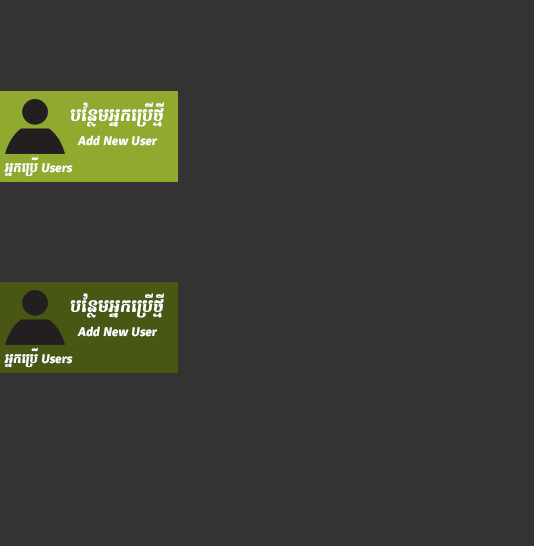
<style>
.page{position:relative;width:534px;height:546px;background:#333333}
.page>*{position:absolute;margin:0}
.t1{font:16px "Romnea-Italic";color:#ffffff}
.t2{font:12px "Romnea-Italic";color:#ffffff}
</style>
<div class="page">
<p class="t1" style="left:70px;top:102px;width:94px;height:25px">ប​ន្ថែម​អ្នក​បេ្រី​ថ្មី​</p>
<p class="t2" style="left:77px;top:135px;width:81px;height:11px">Add New User</p>
<p class="t2" style="left:4px;top:156px;width:69px;height:21px;text-align:center">អ្នក​បេ្រ​ី​ Users</p>
<p class="t1" style="left:70px;top:293px;width:94px;height:25px">ប​ន្ថែម​អ្នក​បេ្រី​ថ្មី​</p>
<p class="t2" style="left:77px;top:326px;width:81px;height:11px">Add New User</p>
<p class="t2" style="left:4px;top:347px;width:69px;height:21px;text-align:center">អ្នក​បេ្រ​ី​ Users</p>
</div>
